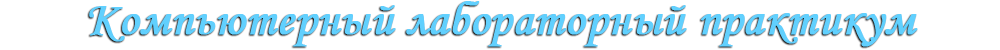
<style>
.page{position:relative;width:1000px;height:50px;background:#ffffff}
.page>*{position:absolute;margin:0}
.t1{font:48px "MonotypeCorsiva";color:#61d0fe;font-weight:bold}
</style>
<div class="page">
<p class="t1" style="left:89px;top:1px;width:829px;height:46px">Компьютерный лабораторный практикум</p>
</div>
